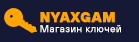
<style>
.page{position:relative;width:139px;height:42px;background:#151936}
.page>*{position:absolute;margin:0}
.t1{font:14px "TTHoves-ExtraBold";letter-spacing:0.05em;color:#ffa500}
.t2{font:10px "TTHoves-Regular";letter-spacing:0.05em;color:#ffffff}
</style>
<div class="page">
<p class="t1" style="left:40px;top:12px;width:75px;height:11px">NYAXGAM</p>
<p class="t2" style="left:40px;top:25px;width:81px;height:8px">Магазин ключей</p>
</div>
